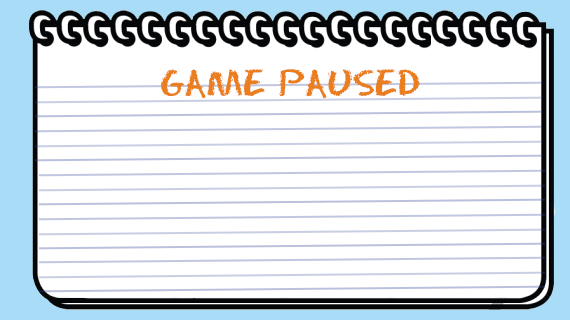
<style>
.page{position:relative;width:570px;height:320px;background:#ffffff}
.page>*{position:absolute;margin:0}
.t1{font:33.3px "Eraser-Regular";color:#ea7d1c}
</style>
<div class="page">
<p class="t1" style="left:161px;top:69px;width:259px;height:30px">GAME PAUSED</p>
</div>
